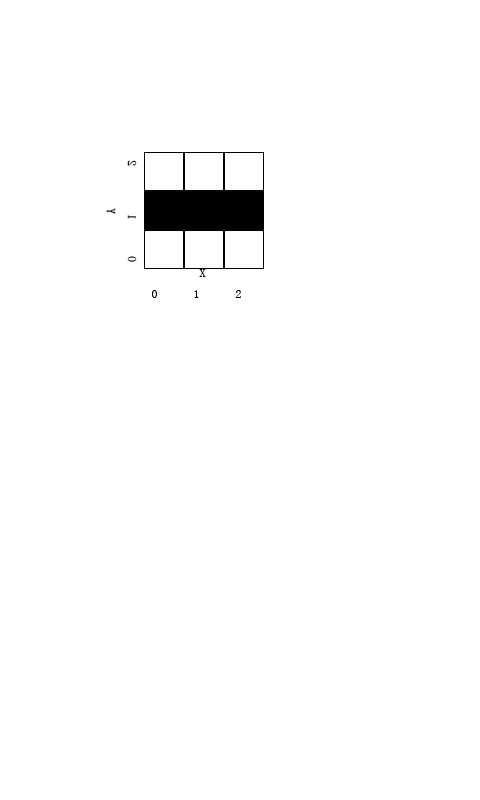
<style>
.page{position:relative;width:480px;height:800px;background:#ffffff}
.page>*{position:absolute;margin:0}
.t1{font:12px "SimSun";color:#000000}
</style>
<div class="page">
<p class="t1" style="left:106px;top:160px;width:31px;height:102px;rotate:-90deg">0      1        2       <br>        Y</p>
<p class="t1" style="left:152px;top:269px;width:89px;height:29px">X<br>0      1      2</p>
</div>
